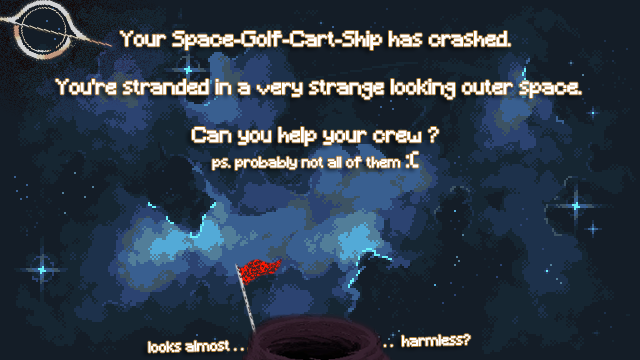
<style>
.page{position:relative;width:640px;height:360px;background:#141d27}
.page>*{position:absolute;margin:0}
.t1{font:20px "Minecraft";color:#ffffff}
.t2{font:14px "Minecraft";color:#ffffff}
.t3{font:21px "Minecraft";color:#ffffff}
.t4{font:13.8px "Minecraft";color:#ffffff}
</style>
<div class="page">
<p class="t1" style="left:55px;top:31px;width:527px;height:139px;text-align:center">Your Space-Golf-Cart-Ship has crashed.<br><br> You're stranded in a very strange looking outer space.<br><br>Can you help your crew ?<br><span class="t2">ps. probably not all of them </span><span class="t3">:(</span></p>
<p class="t4" style="left:148px;top:334px;width:323px;height:19px;rotate:-1deg">looks almost . . ,                        . .   . . .  <span class="t2">harmless</span>?</p>
</div>
